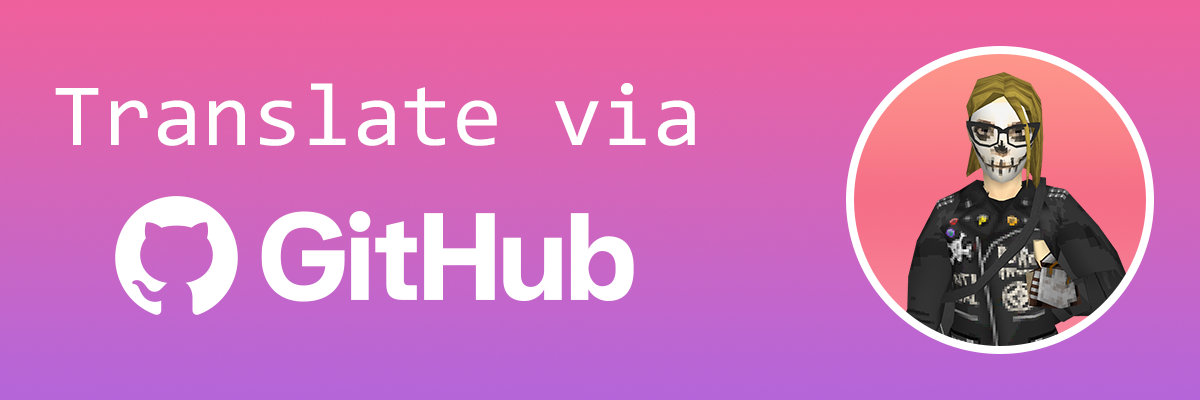
<style>
.page{position:relative;width:1200px;height:400px}
.page>*{position:absolute;margin:0}
.t1{font:89.2px "Consolas";color:#ffffff}
</style>
<div class="page">
<p class="t1" style="left:55px;top:83px;width:640px;height:63px">Translate via</p>
</div>
